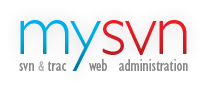
<style>
.page{position:relative;width:210px;height:90px;background:#ffffff}
.page>*{position:absolute;margin:0}
.t1{font:74px "GillSansStd-Light";letter-spacing:-0.02em}
.t2{font:17px "GillSansStd-Condensed";color:#898989}
.t3{font:14px "GillSansStd-Condensed";letter-spacing:-0.085em;color:#b3b3b3}
</style>
<div class="page">
<p class="t1" style="left:20px;top:20px;width:167px;height:51px">mysvn</p>
<p class="t2" style="left:19px;top:59px;width:169px;height:12px">svn <span class="t3">&amp; </span>trac    web  administration</p>
</div>
